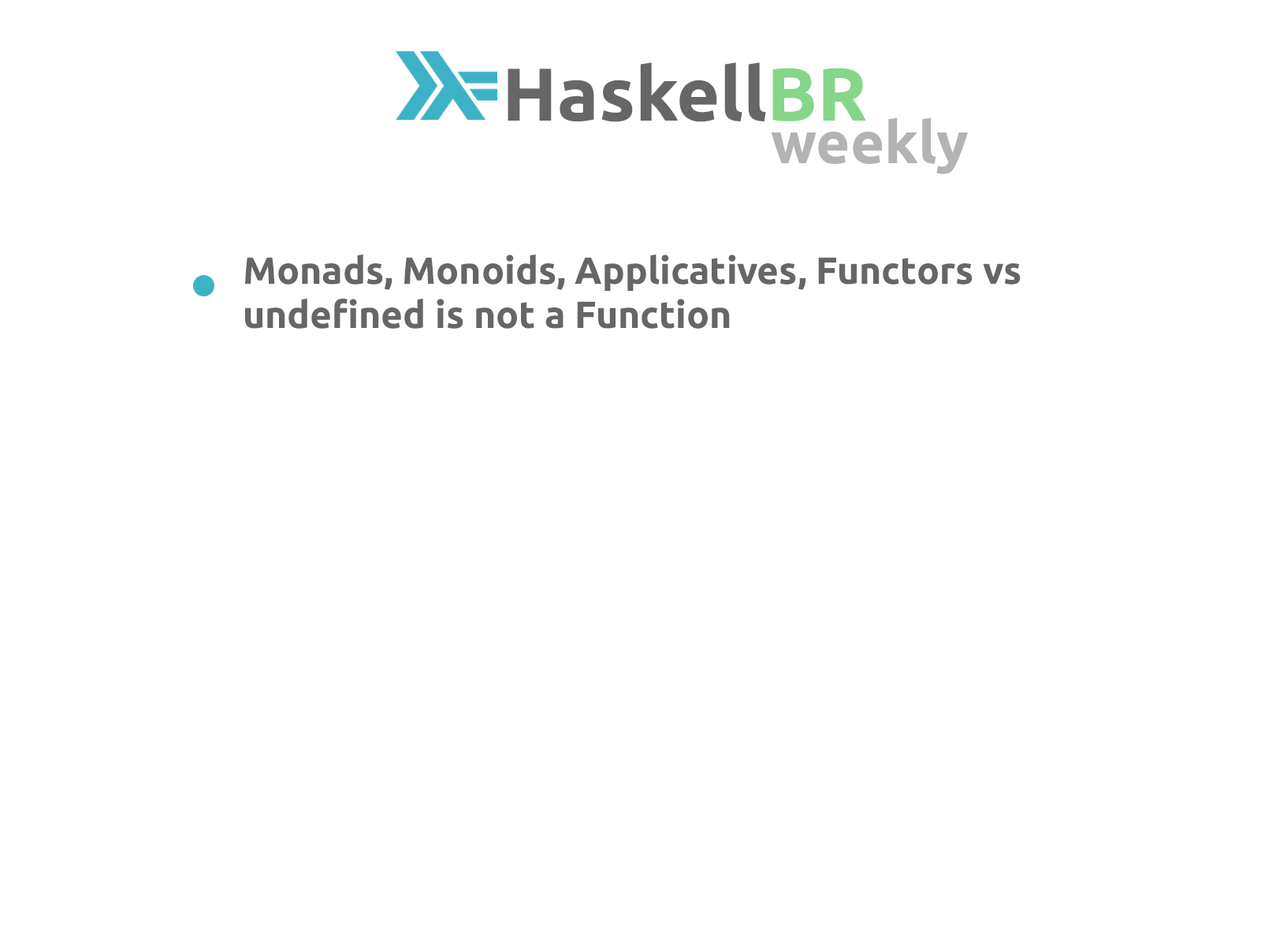
<style>
.page{position:relative;width:1261px;height:946px;background:#ffffff}
.page>*{position:absolute;margin:0}
.t1{font:74.9px "Ubuntu-Bold";color:#666666}
.t2{font:74.9px "Ubuntu-Bold";color:#85d689}
.t3{font:58.5px "Ubuntu-Bold";color:#b3b3b3}
.t4{font:37.8px/44.1px "Ubuntu-Bold";color:#666666}
</style>
<div class="page">
<p class="t1" style="left:508px;top:62px;width:358px;height:60px">Haskell<span class="t2">BR</span></p>
<p class="t3" style="left:771px;top:117px;width:197px;height:57px">weekly</p>
<p class="t4" style="left:245px;top:254px;width:776px;height:75px">Monads, Monoids, Applicatives, Functors vs undefined is not a Function</p>
</div>
